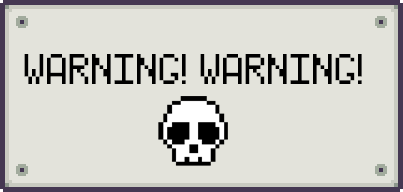
<style>
.page{position:relative;width:403px;height:192px;background:#e3e3db}
.page>*{position:absolute;margin:0}
.t1{font:30px "Pixel-Caps";color:#000000}
</style>
<div class="page">
<p class="t1" style="left:24px;top:54px;width:338px;height:30px">WARNING! WARNING!</p>
</div>
